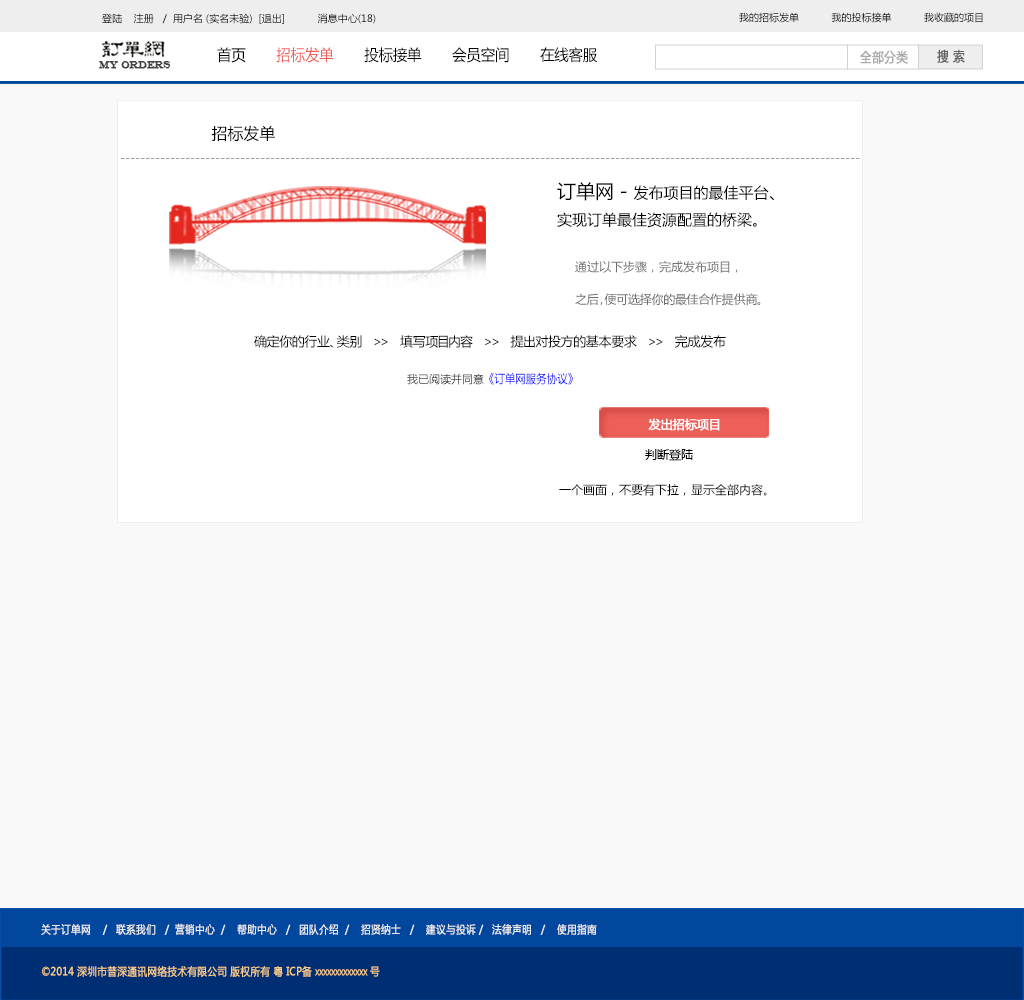
<style>
.page{position:relative;width:1024px;height:1000px;background:#f9f9f9}
.page>*{position:absolute;margin:0}
.t1{font:10px "MicrosoftYaHei";color:#000000}
.t2{font:15.4px "MicrosoftYaHei";color:#000000;font-variant:small-caps;scale:0.94 1}
.t3{font:15.4px "MicrosoftYaHei";color:#ed6059;font-variant:small-caps;scale:0.94 1}
.t4{font:13.2px "MicrosoftYaHei";color:#aaaaaa;font-variant:small-caps;font-weight:bold;scale:0.86 1}
.t5{font:13.2px "MicrosoftYaHei";color:#626262;font-variant:small-caps;font-weight:bold;scale:0.86 1}
.t6{font:9.9px "EngraversMT";color:#434343;font-variant:small-caps;font-weight:bold;scale:0.86 1}
.t7{font:15.8px "MicrosoftYaHei";color:#000000}
.t8{font:17.4px "STXihei";color:#000000;font-variant:small-caps;scale:0.91 1}
.t9{font:12px "MicrosoftYaHei";color:#a0a0a0}
.t10{font:15px/30px "MicrosoftYaHei";color:#000000}
.t11{font:19px/30px "MicrosoftYaHei";color:#000000}
.t12{font:12px/48px "MicrosoftYaHei";color:#6e6e6e}
.t13{font:12px/30px "MicrosoftYaHei";color:#707070}
.t14{font:13px "MicrosoftYaHei";color:#060606}
.t15{font:12.1px "MicrosoftYaHei";color:#0000ff;font-variant:small-caps;scale:0.86 1}
.t16{font:11px "MicrosoftYaHei";color:#313131}
.t17{font:12px "MicrosoftYaHei";color:#ffffff;font-variant:small-caps;font-weight:bold}
.t18{font:12px "MicrosoftYaHei";color:#000000}
.t19{font:12px "MicrosoftYaHei";color:#060606}
.t20{font:11px "MicrosoftYaHei";color:#eeeeee;font-variant:small-caps;font-weight:bold;scale:0.86 1}
.t21{font:15.4px "STXihei";color:#eeeeee;font-variant:small-caps;font-weight:bold;scale:0.86 1}
.t22{font:11px "MicrosoftYaHei";color:#facd89;font-variant:small-caps;font-weight:bold;scale:0.87 1}
.t23{font:11px "MicrosoftYaHei";color:#eeeeee;font-variant:small-caps;font-weight:bold;scale:0.87 1}
</style>
<div class="page">
<p class="t1" style="left:102px;top:13px;width:274px;height:11px">登陆    注册   /  用户名 (实名未验)  [退出]           消息中心(18)</p>
<p class="t1" style="left:739px;top:12px;width:244px;height:11px">我的招标发单           我的投标接单           我收藏的项目</p>
<p class="t2" style="left:217px;top:47px;width:381px;height:16px">首页      <span class="t3"> 招标发单  </span>     投标接单       会员空间       在线客服</p>
<p class="t4" style="left:860px;top:50px;width:48px;height:14px">全部分类</p>
<p class="t5" style="left:937px;top:49px;width:28px;height:14px">搜 索</p>
<p class="t6" style="left:99px;top:61px;width:72px;height:8px">MY ORDERS</p>
<p class="t7" style="left:211px;top:125px;width:64px;height:17px"><span class="t8">     </span>招标发单</p>
<p class="t9" style="left:121px;top:158px;width:739px;height:1px">----------------------------------------------------------------------------------------------------------------------------------------------------</p>
<p class="t10" style="left:557px;top:182px;width:218px;height:46px"><span class="t11">订单网 - </span>发布项目的最佳平台<span class="t11">、<br></span>实现订单最佳资源配置的桥梁。</p>
<p class="t12" style="left:575px;top:261px;width:186px;height:45px"><span class="t13">通过以下步骤，完成发布项目，<br></span>之后，便可选择你的最佳合作提供商。</p>
<p class="t14" style="left:254px;top:335px;width:472px;height:13px">确定你的行业、类别   &gt;&gt;   填写项目内容   &gt;&gt;   提出对投方的基本要求   &gt;&gt;   完成发布</p>
<p class="t15" style="left:407px;top:372px;width:166px;height:13px"><span class="t16">我已阅读并同意</span>《订单网服务协议》</p>
<p class="t17" style="left:648px;top:418px;width:72px;height:13px">发出招标项目</p>
<p class="t18" style="left:645px;top:449px;width:48px;height:12px">判断登陆</p>
<p class="t19" style="left:559px;top:484px;width:208px;height:12px">一个画面，不要有下拉，显示全部内容。</p>
<p class="t20" style="left:41px;top:923px;width:556px;height:12px"><span class="t21"><br><br></span>关于订单网    /   联系我们   /  营销中心  /    帮助中心   /   团队介绍  /    招贤纳士   /    建议与投诉 /   法律声明   /    使用指南</p>
<p class="t22" style="left:42px;top:966px;width:338px;height:11px"><span class="t23"> </span>©2014 深圳市普深通讯网络技术有限公司 版权所有 粤 ICP备 xxxxxxxxxxxxx 号</p>
</div>
